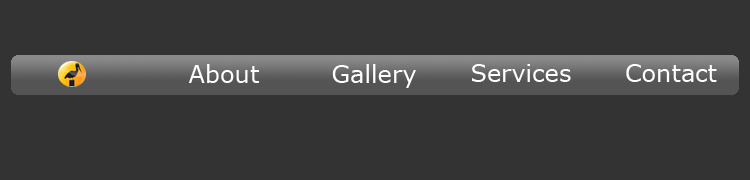
<style>
.page{position:relative;width:750px;height:180px;background:#333333}
.page>*{position:absolute;margin:0}
.t1{font:24px "Verdana";color:#ffffff}
</style>
<div class="page">
<p class="t1" style="left:188px;top:64px;width:71px;height:19px">About</p>
<p class="t1" style="left:332px;top:64px;width:84px;height:24px">Gallery</p>
<p class="t1" style="left:472px;top:64px;width:99px;height:18px">Services</p>
<p class="t1" style="left:626px;top:64px;width:91px;height:18px">Contact</p>
</div>
